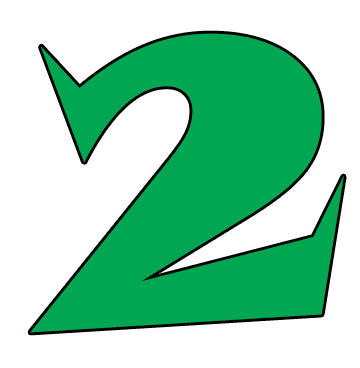
<style>
.page{position:relative;width:360px;height:368px;background:#ffffff}
.page>*{position:absolute;margin:0}
.t1{font:400px "SnapITC-Regular";color:#00a651}
</style>
<div class="page">
<p class="t1" style="left:30px;top:33px;width:314px;height:300px">2</p>
</div>
